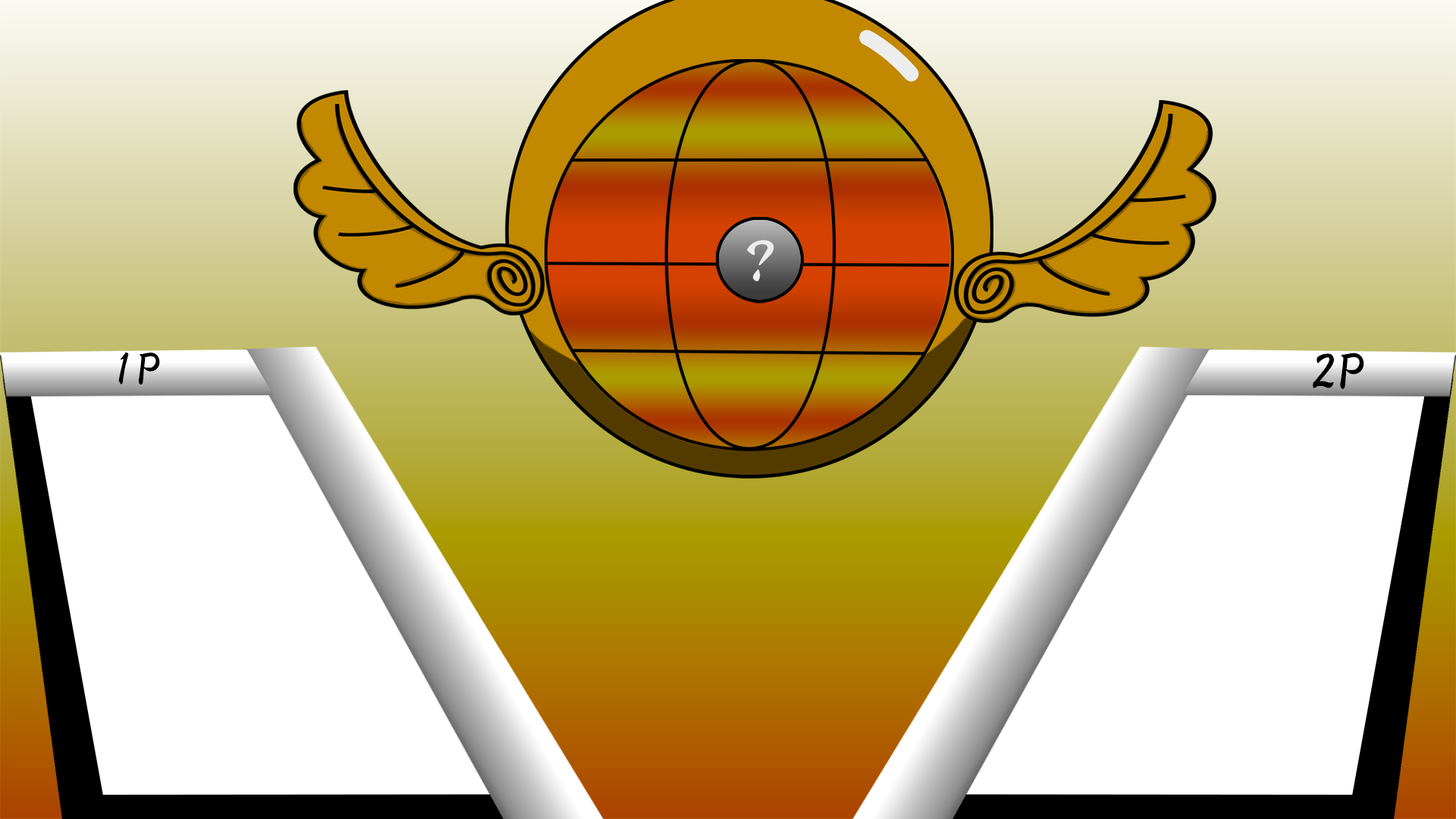
<style>
.page{position:relative;width:1456px;height:819px;background:#ffffff}
.page>*{position:absolute;margin:0}
.t1{font:49.4px "HGSGyoshotai";color:#ededed;scale:1.5 1}
.t2{font:45.4px "HGSGyoshotai";color:#000000;scale:1.15 1}
.t3{font:51.2px "HGSGyoshotai";color:#000000;scale:1.15 1}
</style>
<div class="page">
<p class="t1" style="left:747px;top:240px;width:27px;height:41px">?</p>
<p class="t2" style="left:118px;top:352px;width:42px;height:32px">1P</p>
<p class="t3" style="left:1313px;top:353px;width:51px;height:36px">2P</p>
</div>
